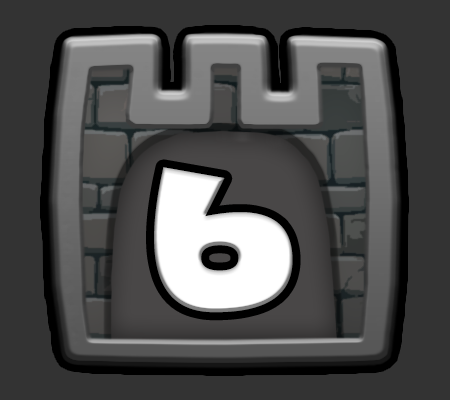
<style>
.page{position:relative;width:450px;height:400px;background:#333333}
.page>*{position:absolute;margin:0}
.t1{font:217px "Funhouse";color:#ffffff}
</style>
<div class="page">
<p class="t1" style="left:154px;top:167px;width:139px;height:146px">6</p>
</div>
